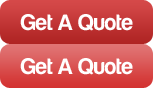
<style>
.page{position:relative;width:153px;height:88px}
.page>*{position:absolute;margin:0}
.t1{font:23px "Harabara";color:#ffffff}
</style>
<div class="page">
<p class="t1" style="left:20px;top:14px;width:113px;height:17px">Get A Quote</p>
<p class="t1" style="left:20px;top:58px;width:113px;height:17px">Get A Quote</p>
</div>
